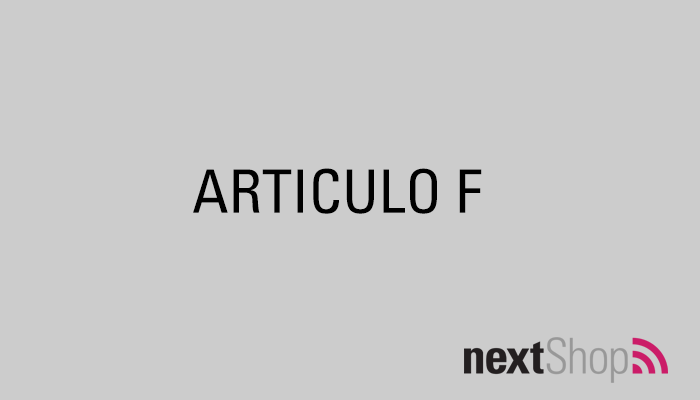
<style>
.page{position:relative;width:700px;height:400px;background:#cccccc}
.page>*{position:absolute;margin:0}
.t1{font:60px "UniversLTStd-Cn";color:#000000}
</style>
<div class="page">
<p class="t1" style="left:193px;top:168px;width:289px;height:46px">ARTICULO F</p>
</div>
